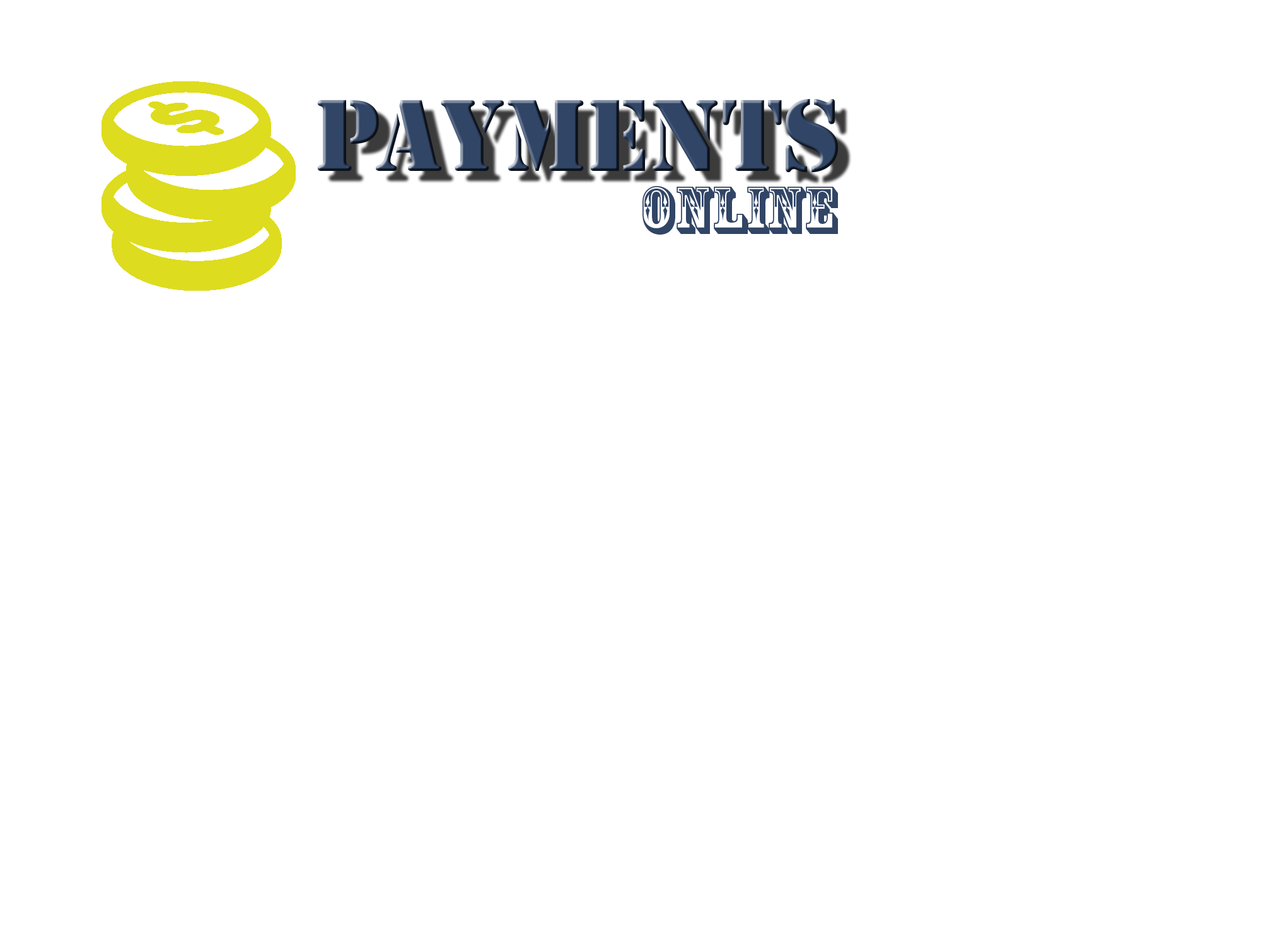
<style>
.page{position:relative;width:1261px;height:946px;background:#ffffff}
.page>*{position:absolute;margin:0}
.t1{font:94.6px "StencilStd";color:#314566}
.t2{font:63px "RosewoodStd-Regular";color:#314566}
</style>
<div class="page">
<p class="t1" style="left:317px;top:99px;width:521px;height:73px">PAYMENTS</p>
<p class="t2" style="left:642px;top:186px;width:196px;height:49px">ONLINE</p>
</div>
